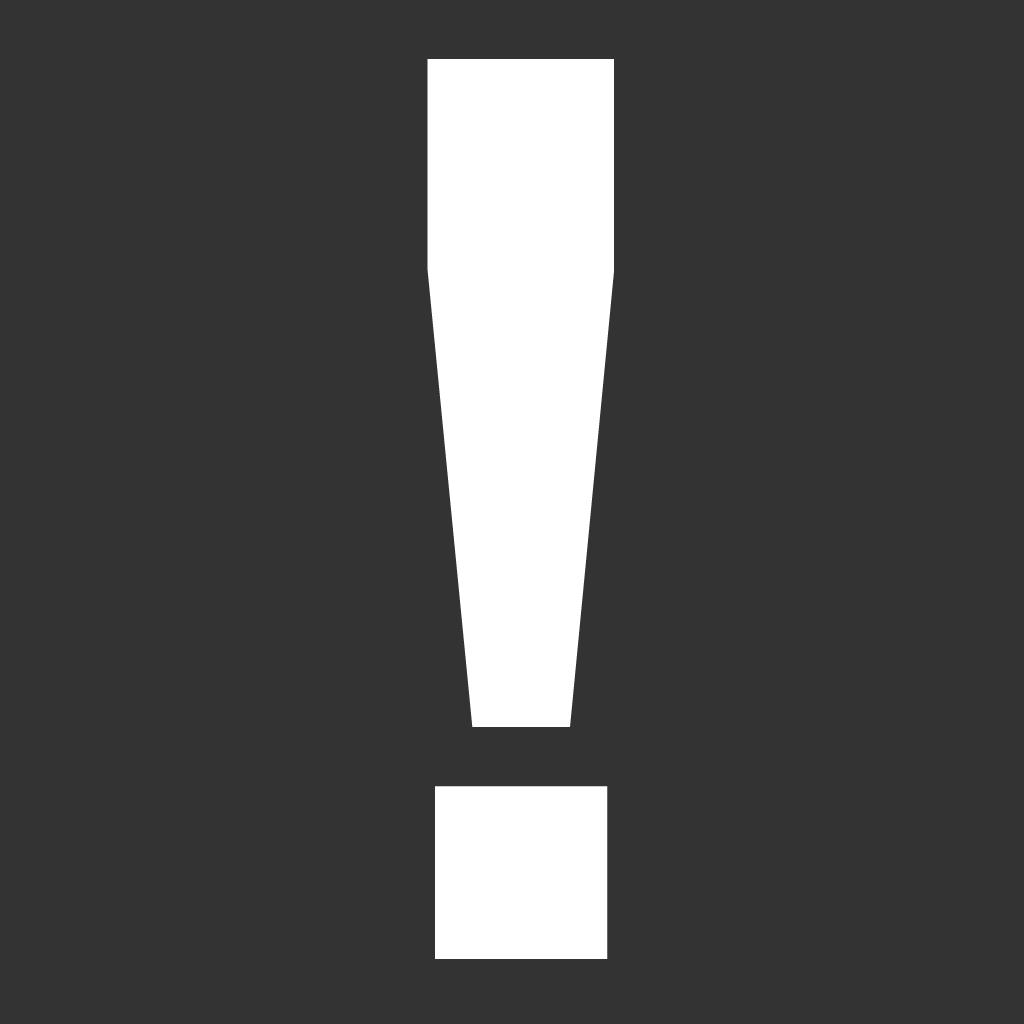
<style>
.page{position:relative;width:1024px;height:1024px;background:#333333}
.page>*{position:absolute;margin:0}
.t1{font:1257px "Arial-BoldMT";color:#ffffff}
</style>
<div class="page">
<p class="t1" style="left:427px;top:59px;width:187px;height:900px">!</p>
</div>
